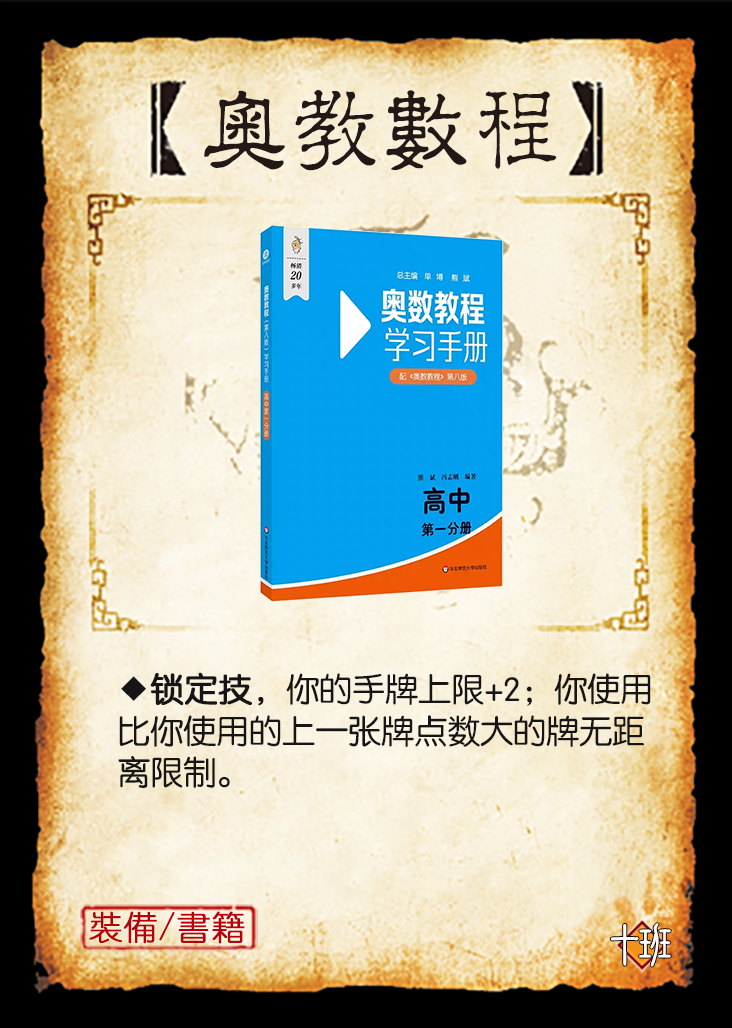
<style>
.page{position:relative;width:732px;height:1028px}
.page>*{position:absolute;margin:0}
.t1{font:95.8px "JMFLS_GBK";color:#221815;scale:0.95 1}
.t2{font:33.3px/41.7px "FZY3JW--GB1-0";letter-spacing:-0.01em;color:#151515}
.t3{font:33.3px/41.7px "FZY3JW--GB1-0";letter-spacing:-0.01em;color:#151515;font-weight:bold}
.t4{font:33.3px "YouYuan";color:#ba0007;font-weight:bold}
.t5{font:50px "DFNewChuan-W5-WINP-BF";letter-spacing:-0.4em;color:#ffffff}
</style>
<div class="page">
<p class="t1" style="left:204px;top:89px;width:353px;height:82px">奧教數程</p>
<p class="t2" style="left:118px;top:672px;width:533px;height:116px">◆<span class="t3">锁定技，</span>你的手牌上限+2；你使用<br>比你使用的上一张牌点数大的牌无距<br>离限制。</p>
<p class="t4" style="left:89px;top:911px;width:156px;height:33px">裝備/書籍</p>
<p class="t5" style="left:611px;top:923px;width:60px;height:44px">十班</p>
</div>
